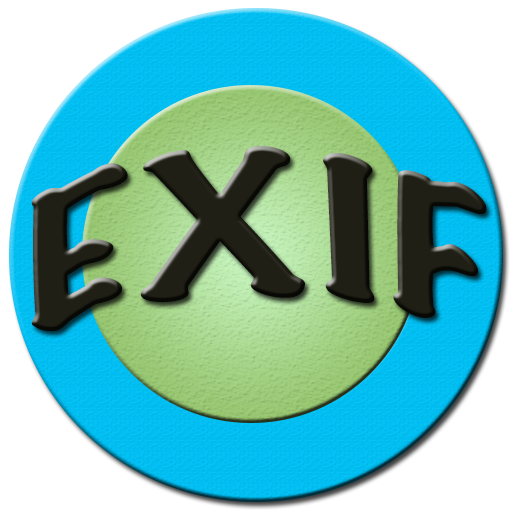
<style>
.page{position:relative;width:512px;height:512px;background:#ffffff}
.page>*{position:absolute;margin:0}
.t1{font:176.3px "MarkerFelt-Thin";color:#1f1f15;scale:1.44 1}
</style>
<div class="page">
<p class="t1" style="left:31px;top:146px;width:456px;height:186px">EXIF</p>
</div>
